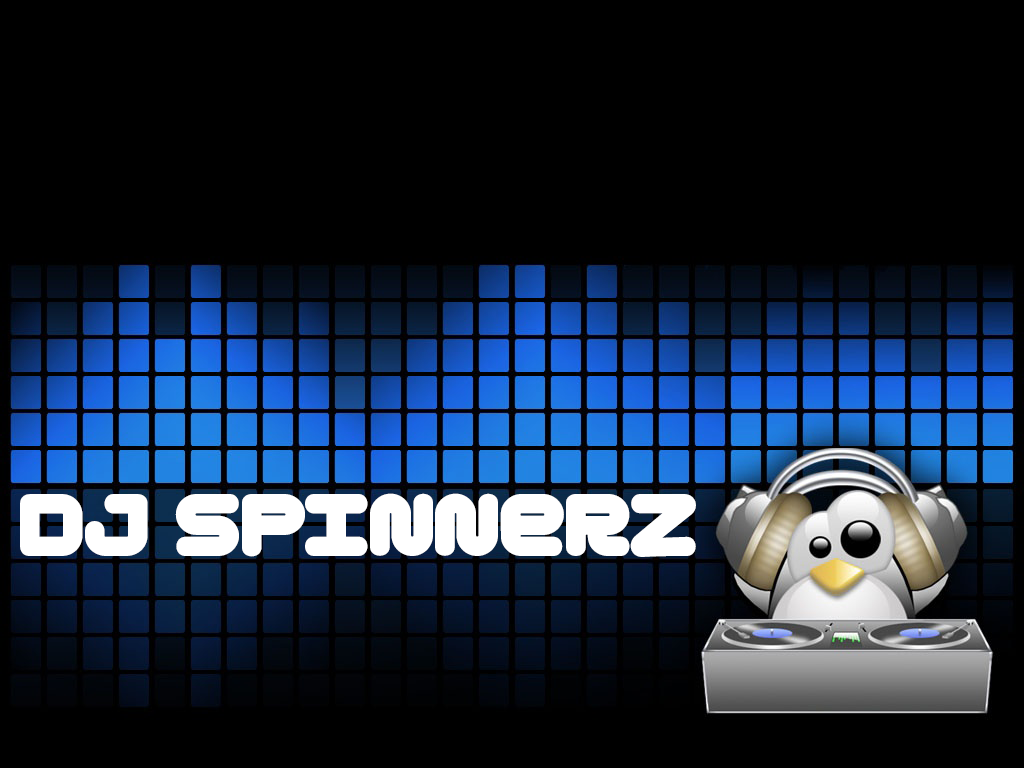
<style>
.page{position:relative;width:1024px;height:768px;background:#000000}
.page>*{position:absolute;margin:0}
.t1{font:88.2px "Gota";color:#ffffff}
</style>
<div class="page">
<p class="t1" style="left:20px;top:493px;width:676px;height:64px">DJ Spinnerz</p>
</div>
